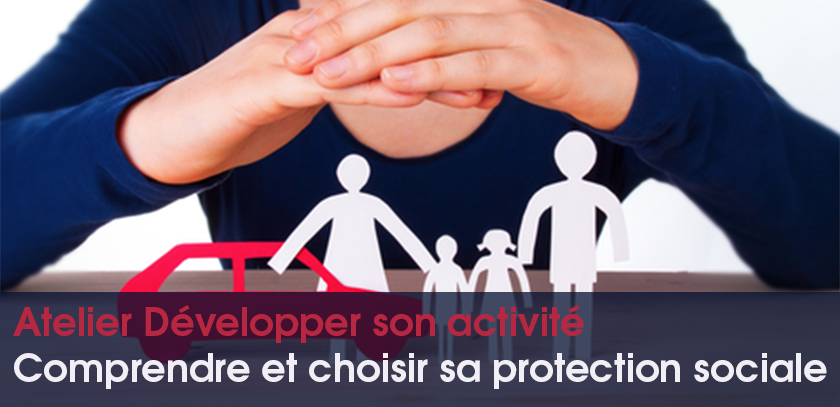
<style>
.page{position:relative;width:840px;height:407px}
.page>*{position:absolute;margin:0}
.t1{font:38.5px "TeXGyreAdventor-Bold";color:#f1eff5}
.t2{font:38.5px "TeXGyreAdventor-Bold";color:#b72741}
</style>
<div class="page">
<p class="t1" style="left:13px;top:305px;width:814px;height:84px"><span class="t2">Atelier Développer son activité<br></span>Comprendre et choisir sa protection sociale</p>
</div>
